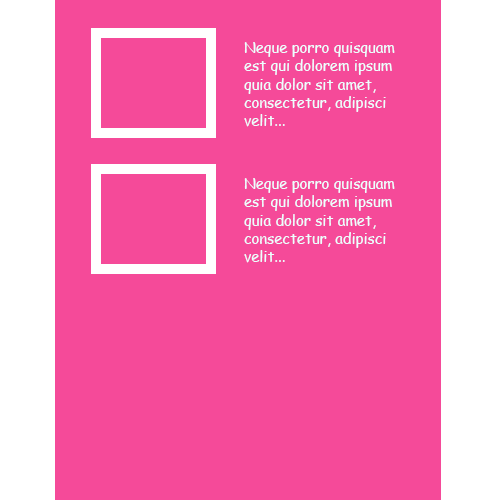
<style>
.page{position:relative;width:500px;height:500px;background:#f54a99}
.page>*{position:absolute;margin:0}
.t1{font:15.3px "ComicSansMS";color:#ecffff;scale:0.97 1}
</style>
<div class="page">
<p class="t1" style="left:244px;top:42px;width:151px;height:85px">Neque porro quisquam est qui dolorem ipsum quia dolor sit amet, consectetur, adipisci velit...</p>
<p class="t1" style="left:244px;top:178px;width:151px;height:85px">Neque porro quisquam est qui dolorem ipsum quia dolor sit amet, consectetur, adipisci velit...</p>
</div>
